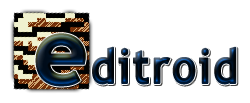
<style>
.page{position:relative;width:250px;height:103px;background:#ffffff}
.page>*{position:absolute;margin:0}
.t1{font:92.9px "TrebuchetMS-Bold";letter-spacing:0.025em;font-weight:bold}
.t2{font:47.8px "TrebuchetMS-Bold";letter-spacing:0.025em;font-weight:bold;scale:0.89 1}
</style>
<div class="page">
<p class="t1" style="left:35px;top:33px;width:51px;height:54px">e</p>
<p class="t1" style="left:35px;top:33px;width:51px;height:54px">e</p>
<p class="t2" style="left:92px;top:46px;width:145px;height:39px">ditroid</p>
</div>
